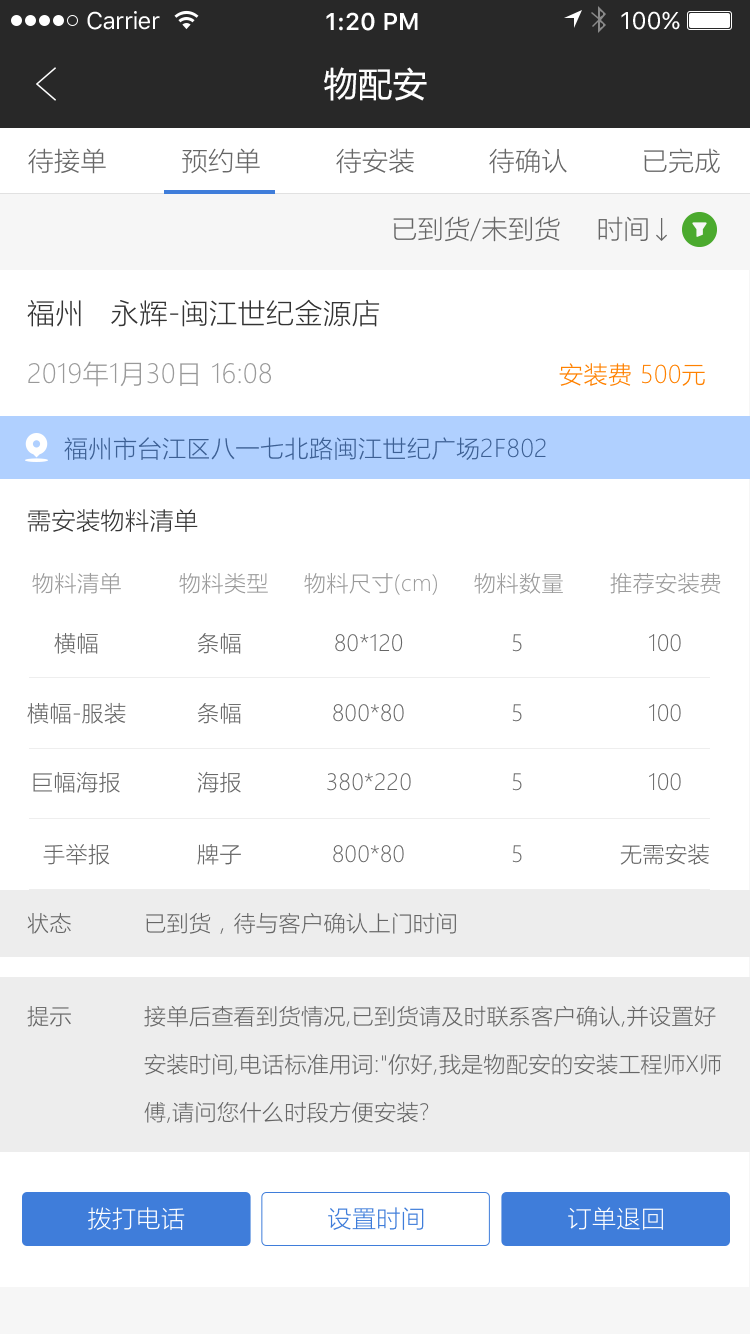
<style>
.page{position:relative;width:750px;height:1334px;background:#ffffff}
.page>*{position:absolute;margin:0}
.t1{font:24px "SFUIText-Regular";letter-spacing:-0.025em;color:#ffffff}
.t2{font:24px "SFUIText-Semibold";color:#ffffff}
.t3{font:24px "SFUIText-Regular";color:#ffffff}
.t4{font:34px "MicrosoftYaHei";letter-spacing:0.02em;color:#ffffff}
.t5{font:26px "MicrosoftYaHeiLight";letter-spacing:0.02em;color:#666666}
.t6{font:28px "MicrosoftYaHeiLight";letter-spacing:0.02em;color:#333333}
.t7{font:26px "MicrosoftYaHeiLight";letter-spacing:0.02em;color:#999999}
.t8{font:24px "MicrosoftYaHeiLight";letter-spacing:0.02em;color:#ff8100}
.t9{font:24px "MicrosoftYaHeiLight";letter-spacing:0.02em;color:#3d6094}
.t10{font:24px "MicrosoftYaHeiLight";letter-spacing:0.02em;color:#333333}
.t11{font:22px "MicrosoftYaHeiLight";letter-spacing:0.02em;color:#999999}
.t12{font:22px "MicrosoftYaHeiLight";letter-spacing:0.02em;color:#666666}
.t13{font:22px/48px "MicrosoftYaHeiLight";letter-spacing:0.02em;color:#666666}
.t14{font:24px "MicrosoftYaHeiLight";letter-spacing:0.02em;color:#ffffff}
.t15{font:24px "MicrosoftYaHeiLight";letter-spacing:0.02em;color:#3f7dda}
</style>
<div class="page">
<p class="t1" style="left:87px;top:11px;width:73px;height:19px">Carrier</p>
<p class="t2" style="left:326px;top:12px;width:92px;height:19px">1:20 PM</p>
<p class="t3" style="left:621px;top:11px;width:59px;height:19px">100%</p>
<p class="t4" style="left:324px;top:67px;width:103px;height:34px">物配安</p>
<p class="t5" style="left:28px;top:148px;width:78px;height:26px">待接单</p>
<p class="t5" style="left:182px;top:148px;width:78px;height:26px">预约单</p>
<p class="t5" style="left:336px;top:148px;width:78px;height:26px">待安装</p>
<p class="t5" style="left:489px;top:148px;width:78px;height:26px">待确认</p>
<p class="t5" style="left:644px;top:148px;width:76px;height:25px">已完成</p>
<p class="t5" style="left:393px;top:216px;width:167px;height:26px">已到货/未到货</p>
<p class="t5" style="left:598px;top:216px;width:50px;height:26px">时间</p>
<p class="t6" style="left:27px;top:299px;width:353px;height:28px">福州   永辉-闽江世纪金源店</p>
<p class="t7" style="left:28px;top:361px;width:243px;height:26px">2019年1月30日 16:08</p>
<p class="t8" style="left:559px;top:363px;width:146px;height:23px">安装费 500元</p>
<p class="t9" style="left:64px;top:437px;width:482px;height:23px">福州市台江区八一七北路闽江世纪广场2F802</p>
<p class="t10" style="left:27px;top:509px;width:171px;height:23px">需安装物料清单</p>
<p class="t11" style="left:32px;top:572px;width:89px;height:22px">物料清单</p>
<p class="t11" style="left:179px;top:572px;width:89px;height:22px">物料类型</p>
<p class="t11" style="left:304px;top:572px;width:133px;height:23px">物料尺寸(cm)</p>
<p class="t11" style="left:474px;top:572px;width:89px;height:22px">物料数量</p>
<p class="t11" style="left:610px;top:572px;width:111px;height:22px">推荐安装费</p>
<p class="t12" style="left:54px;top:633px;width:44px;height:21px">横幅</p>
<p class="t12" style="left:197px;top:633px;width:44px;height:21px">条幅</p>
<p class="t12" style="left:335px;top:634px;width:68px;height:18px">80*120</p>
<p class="t12" style="left:512px;top:634px;width:10px;height:18px">5</p>
<p class="t12" style="left:649px;top:634px;width:32px;height:18px">100</p>
<p class="t12" style="left:27px;top:702px;width:99px;height:22px">横幅-服装</p>
<p class="t12" style="left:197px;top:703px;width:44px;height:21px">条幅</p>
<p class="t12" style="left:333px;top:704px;width:71px;height:18px">800*80</p>
<p class="t12" style="left:512px;top:704px;width:10px;height:18px">5</p>
<p class="t12" style="left:649px;top:704px;width:32px;height:18px">100</p>
<p class="t12" style="left:33px;top:771px;width:87px;height:22px">巨幅海报</p>
<p class="t12" style="left:197px;top:771px;width:44px;height:22px">海报</p>
<p class="t12" style="left:327px;top:773px;width:84px;height:18px">380*220</p>
<p class="t12" style="left:512px;top:773px;width:10px;height:18px">5</p>
<p class="t12" style="left:649px;top:773px;width:32px;height:18px">100</p>
<p class="t12" style="left:43px;top:844px;width:67px;height:21px">手举报</p>
<p class="t12" style="left:197px;top:844px;width:44px;height:21px">牌子</p>
<p class="t12" style="left:333px;top:845px;width:71px;height:18px">800*80</p>
<p class="t12" style="left:512px;top:845px;width:10px;height:18px">5</p>
<p class="t12" style="left:620px;top:843px;width:89px;height:22px">无需安装</p>
<p class="t12" style="left:27px;top:912px;width:44px;height:22px">状态</p>
<p class="t12" style="left:146px;top:912px;width:310px;height:22px">已到货，待与客户确认上门时间</p>
<p class="t12" style="left:27px;top:1006px;width:44px;height:21px">提示</p>
<p class="t13" style="left:144px;top:1005px;width:577px;height:118px">接单后查看到货情况,已到货请及时联系客户确认,并设置好<br>安装时间,电话标准用词:"你好,我是物配安的安装工程师X师<br>傅,请问您什么时段方便安装?</p>
<p class="t14" style="left:88px;top:1207px;width:97px;height:23px">拨打电话</p>
<p class="t15" style="left:328px;top:1207px;width:96px;height:23px">设置时间</p>
<p class="t14" style="left:568px;top:1207px;width:95px;height:23px">订单退回</p>
</div>
